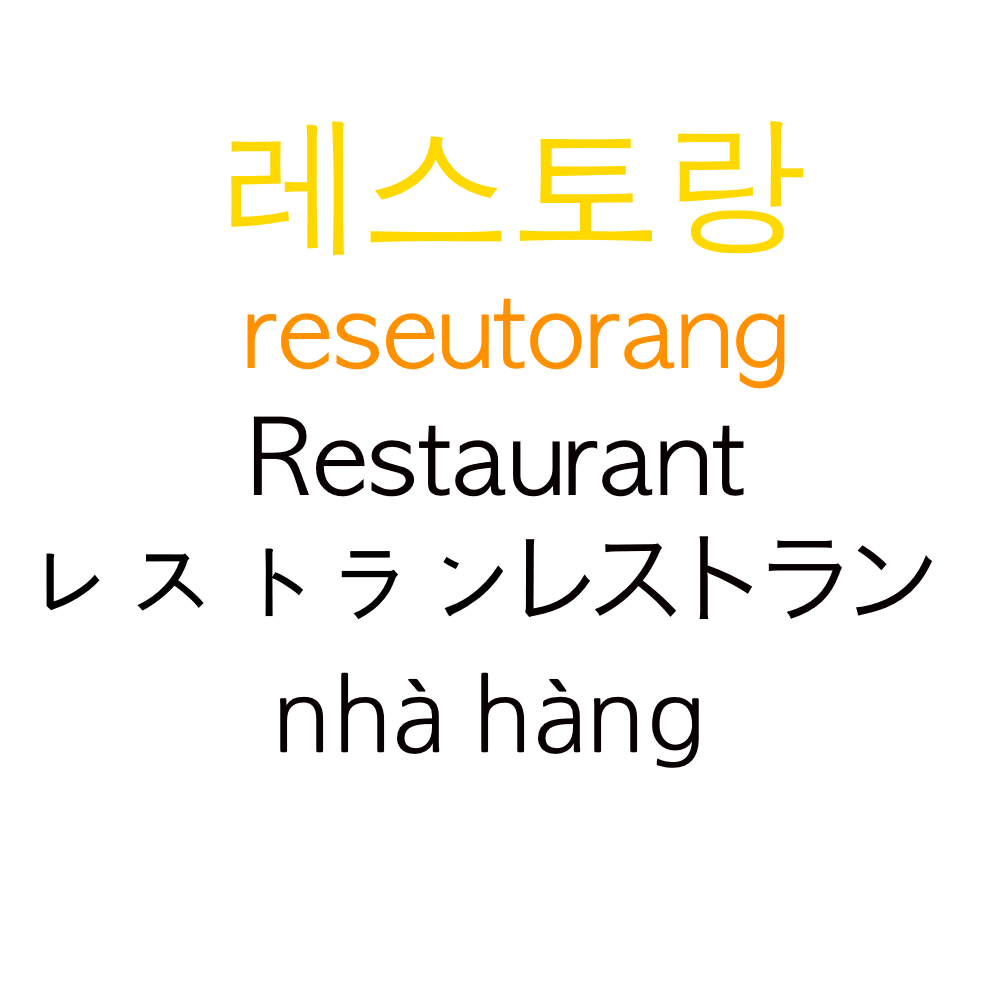
<style>
.page{position:relative;width:1000px;height:1000px;background:#ffffff}
.page>*{position:absolute;margin:0}
.t1{font:150px "AppleGothic";color:#ffd800}
.t2{font:100px "AppleGothic";color:#ff9000}
.t3{font:100px "AppleGothic";color:#080000}
.t4{font:100px "HiraKakuProN-W3";color:#080000}
.t5{font:100px "AppleGothic";color:#000000}
.t6{font:100px "NanumGothic";color:#080000}
</style>
<div class="page">
<p class="t1" style="left:231px;top:121px;width:573px;height:135px">레스토랑</p>
<p class="t2" style="left:247px;top:298px;width:538px;height:91px">reseutorang</p>
<p class="t3" style="left:253px;top:416px;width:491px;height:81px">Restaurant</p>
<p class="t4" style="left:525px;top:536px;width:407px;height:84px">レストラン</p>
<p class="t5" style="left:46px;top:548px;width:457px;height:72px">レストラン</p>
<p class="t6" style="left:280px;top:672px;width:419px;height:96px">nhà hàng</p>
</div>
